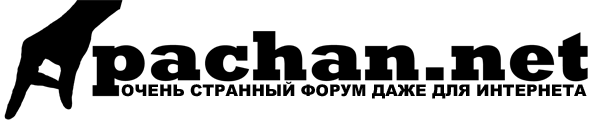
<style>
.page{position:relative;width:600px;height:127px;background:#ffffff}
.page>*{position:absolute;margin:0}
.t1{font:15.9px "Arial-Black";color:#000000}
</style>
<div class="page">
<p class="t1" style="left:121px;top:81px;width:466px;height:18px">ОЧЕНЬ СТРАННЫЙ ФОРУМ ДАЖЕ ДЛЯ ИНТЕРНЕТА</p>
</div>
